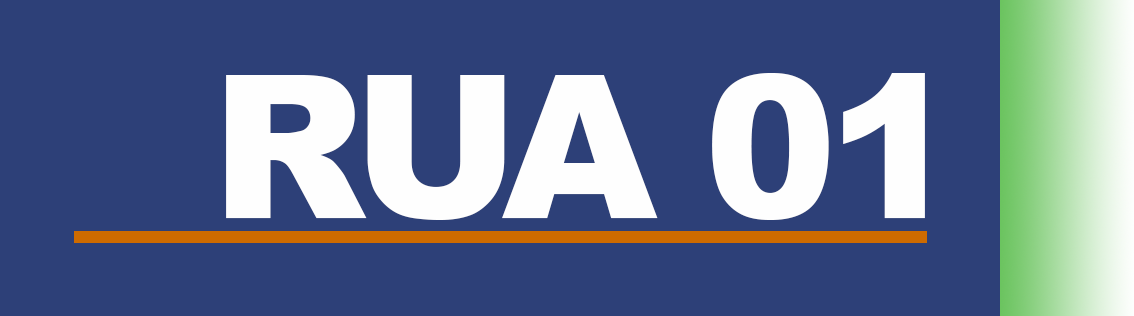
<style>
.page{position:relative;width:1134px;height:316px;background:#2d4078}
.page>*{position:absolute;margin:0}
.t1{font:200px "Arial-Black";letter-spacing:-0.05em;color:#fefefe}
</style>
<div class="page">
<p class="t1" style="left:226px;top:73px;width:699px;height:147px">RUA 01</p>
</div>
